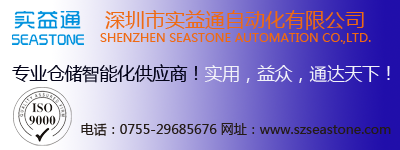
<style>
.page{position:relative;width:400px;height:150px}
.page>*{position:absolute;margin:0}
.t1{font:20px "MicrosoftYaHei";color:#ef6a12}
.t2{font:12px "MicrosoftYaHei";color:#ef6a12}
.t3{font:17.5px "MicrosoftYaHei";color:#030318}
.t4{font:17.5px "MicrosoftYaHei";color:#f2f2f9}
.t5{font:13px "MicrosoftYaHei";color:#241b16}
</style>
<div class="page">
<p class="t1" style="left:105px;top:10px;width:259px;height:20px">深圳市实益通自动化有限公司</p>
<p class="t2" style="left:100px;top:33px;width:271px;height:11px">SHENZHEN SEASTONE AUTOMATION CO.,LTD.</p>
<p class="t3" style="left:12px;top:64px;width:378px;height:19px">专业仓储智能化供应商！<span class="t4">实用，益众，通达天下！</span></p>
<p class="t5" style="left:81px;top:123px;width:310px;height:13px">电话：0755-29685676 网址：www.szseastone.com</p>
</div>
